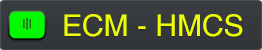
<style>
.page{position:relative;width:262px;height:50px}
.page>*{position:absolute;margin:0}
.t1{font:30px "Helvetica";color:#eefd00}
</style>
<div class="page">
<p class="t1" style="left:64px;top:14px;width:179px;height:23px">ECM - HMCS</p>
</div>
